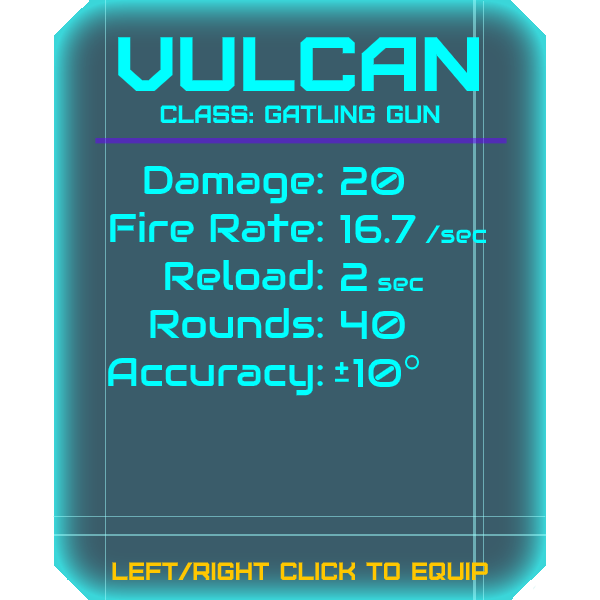
<style>
.page{position:relative;width:600px;height:600px;background:#3a5c6a}
.page>*{position:absolute;margin:0}
.t1{font:76.8px "Furore";color:#00ffff;scale:1.13 1}
.t2{font:25px "Furore";color:#00ffff}
.t3{font:40px "Audiowide-Regular";color:#00ffff}
.t4{font:25px "Audiowide-Regular";color:#00ffff}
.t5{font:25px "Furore";color:#ffc700}
</style>
<div class="page">
<p class="t1" style="left:118px;top:37px;width:361px;height:54px">vulcan</p>
<p class="t2" style="left:160px;top:105px;width:280px;height:18px">Class: gatling gun</p>
<p class="t3" style="left:108px;top:165px;width:215px;height:231px;text-align:right">Damage:<br>Fire Rate:<br>Reload:<br>Rounds:<br>Accuracy:</p>
<p class="t3" style="left:340px;top:166px;width:146px;height:221px">20<br>16.7 <span class="t4">/sec<br></span>2 <span class="t4">sec<br></span>40<br> 10</p>
<p class="t5" style="left:112px;top:562px;width:376px;height:18px">left/right click to equip</p>
</div>
